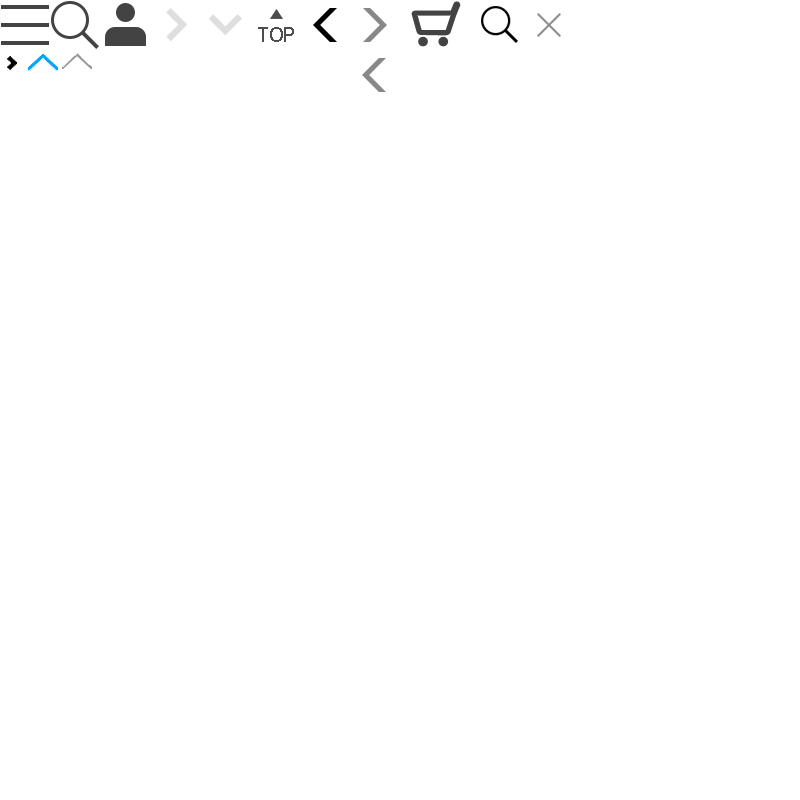
<style>
.page{position:relative;width:800px;height:800px;background:#ffffff}
.page>*{position:absolute;margin:0}
.t1{font:19.6px "ArialMT";letter-spacing:-0.1em;color:#4d4d4f}
</style>
<div class="page">
<p class="t1" style="left:258px;top:27px;width:36px;height:15px">TOP</p>
</div>
